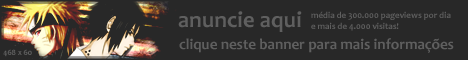
<style>
.page{position:relative;width:468px;height:60px;background:#282828}
.page>*{position:absolute;margin:0}
.t1{font:23px "Candara-Bold";color:#5f5f5f}
.t2{font:9px "Candara-Bold";color:#5f5f5f}
.t3{font:15px "Candara-Bold";color:#5f5f5f}
.t4{font:8px "Candara-Bold";color:#5f5f5f}
</style>
<div class="page">
<p class="t1" style="left:178px;top:11px;width:124px;height:21px">anuncie aqui</p>
<p class="t2" style="left:311px;top:11px;width:140px;height:20px">média de 300.000 pageviews por dia<br>e mais de 4.000 visitas!</p>
<p class="t3" style="left:179px;top:38px;width:275px;height:15px">clique neste banner para mais informações</p>
<p class="t4" style="left:3px;top:49px;width:29px;height:8px">468 x 60</p>
</div>
